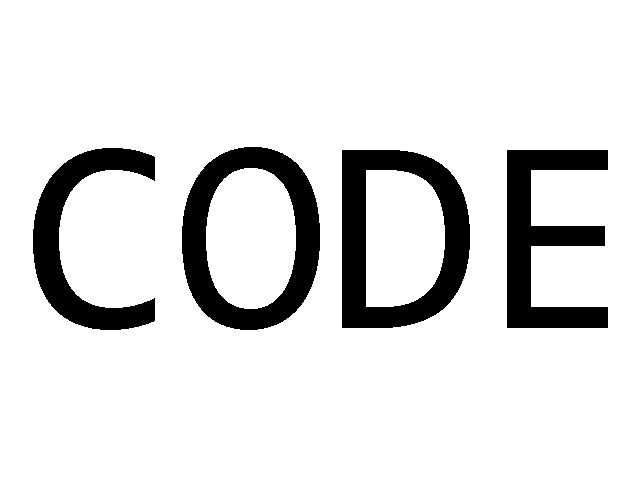
<style>
.page{position:relative;width:640px;height:480px;background:#ffffff}
.page>*{position:absolute;margin:0}
.t1{font:278.9px "Consolas";color:#000000}
</style>
<div class="page">
<p class="t1" style="left:33px;top:147px;width:575px;height:183px">CODE</p>
</div>
